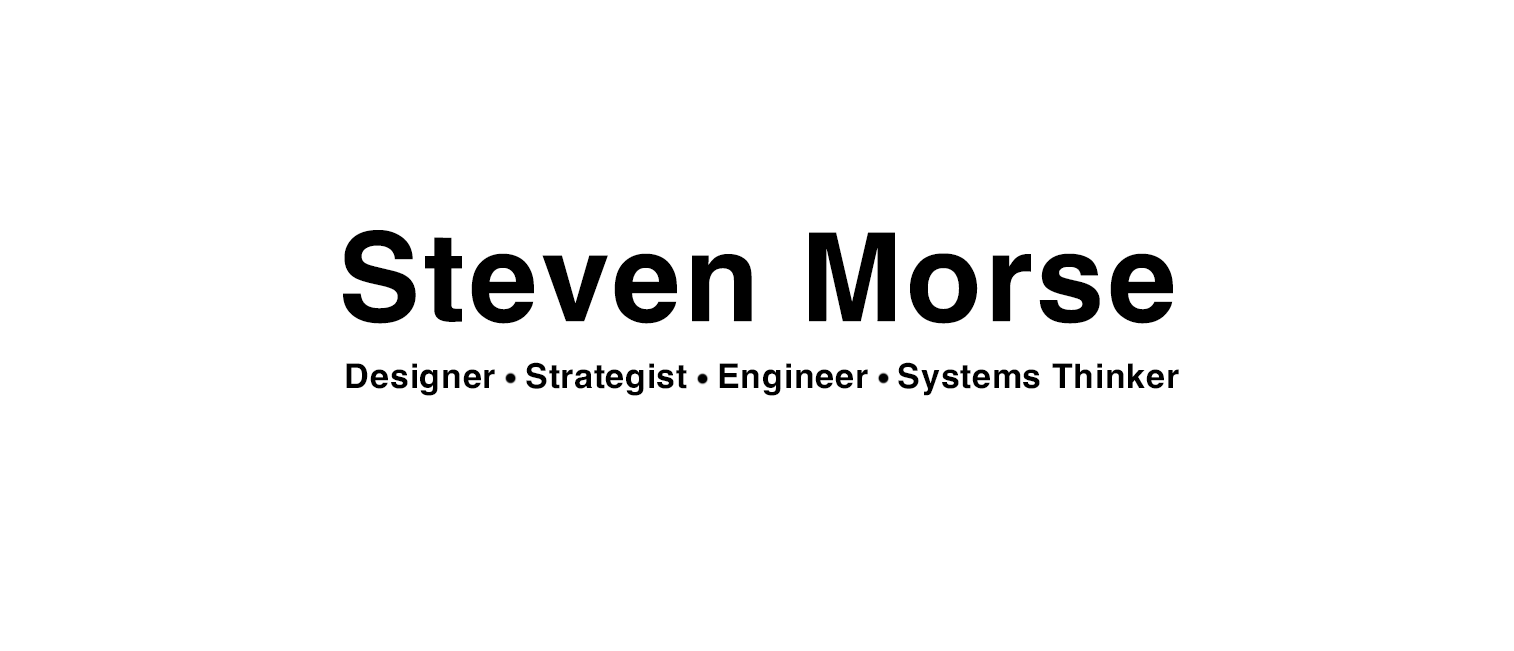
<style>
.page{position:relative;width:1514px;height:651px;background:#ffffff}
.page>*{position:absolute;margin:0}
.t1{font:123px "Helvetica-Bold";letter-spacing:0.03em;color:#000000}
.t2{font:34px "Helvetica-Bold";letter-spacing:0.02em;color:#000000}
</style>
<div class="page">
<p class="t1" style="left:343px;top:230px;width:830px;height:94px">Steven Morse</p>
<p class="t2" style="left:346px;top:362px;width:833px;height:34px">Designer   Strategist   Engineer   Systems Thinker</p>
</div>
